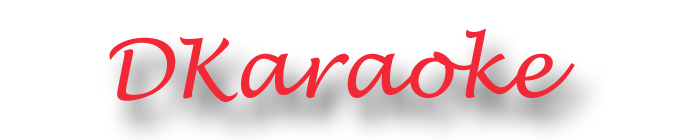
<style>
.page{position:relative;width:700px;height:140px;background:#ffffff}
.page>*{position:absolute;margin:0}
.t1{font:80px "LucidaHandwriting-Italic";color:#f32837}
</style>
<div class="page">
<p class="t1" style="left:109px;top:28px;width:466px;height:74px">DKaraoke</p>
</div>
